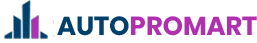
<style>
.page{position:relative;width:257px;height:43px;background:#ffffff}
.page>*{position:absolute;margin:0}
.t1{font:26px "Poppins-Bold";color:#b030b0}
.t2{font:26px "Poppins-Bold";color:#00406a}
</style>
<div class="page">
<p class="t1" style="left:57px;top:16px;width:200px;height:20px"><span class="t2">AUTO</span>PROMART</p>
</div>
